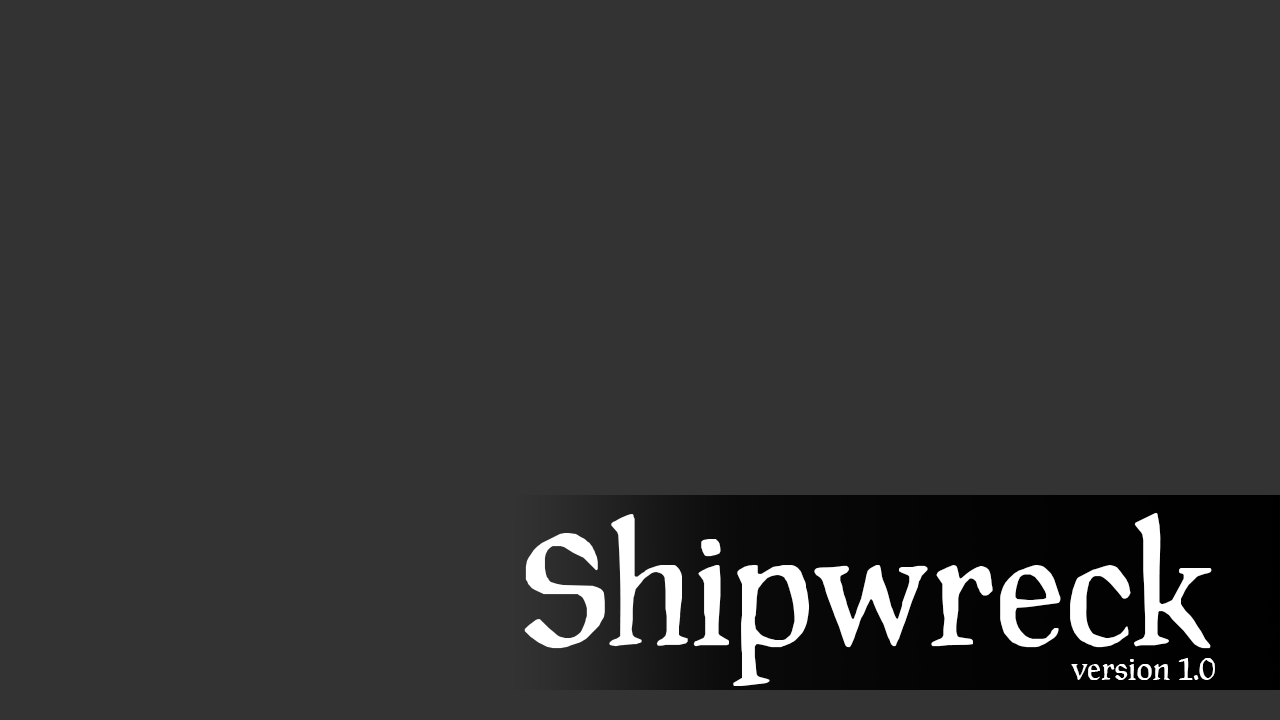
<style>
.page{position:relative;width:1280px;height:720px;background:#333333}
.page>*{position:absolute;margin:0}
.t1{font:150px "ManuskriptAntD-Reg";color:#ffffff}
.t2{font:30px "ManuskriptAntD-Reg";color:#ffffff}
</style>
<div class="page">
<p class="t1" style="left:524px;top:513px;width:688px;height:173px">Shipwreck</p>
<p class="t2" style="left:1071px;top:658px;width:144px;height:22px">version 1.0</p>
</div>
